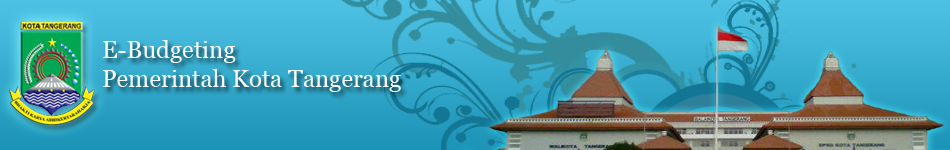
<style>
.page{position:relative;width:950px;height:150px}
.page>*{position:absolute;margin:0}
.t1{font:24px "Georgia";color:#f9fdff}
</style>
<div class="page">
<p class="t1" style="left:103px;top:40px;width:298px;height:52px">E-Budgeting<br>Pemerintah Kota Tangerang</p>
</div>
